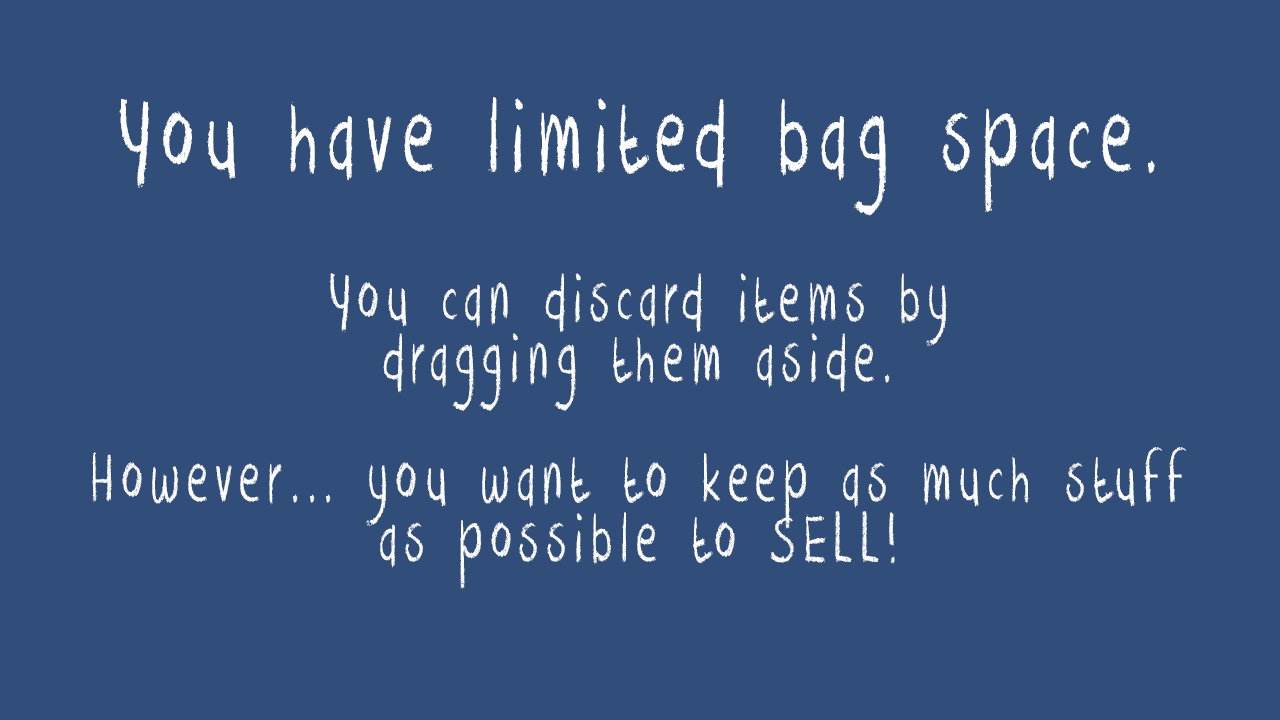
<style>
.page{position:relative;width:1280px;height:720px;background:#314d79}
.page>*{position:absolute;margin:0}
.t1{font:78.5px "DKCrayonCrumble";letter-spacing:0.159em;color:#ffffff;scale:0.64 1}
.t2{font:117.8px "DKCrayonCrumble";letter-spacing:0.159em;color:#ffffff;scale:0.64 1}
</style>
<div class="page">
<p class="t1" style="left:92px;top:97px;width:1094px;height:492px;text-align:center"><span class="t2">You have limited bag space.<br><br></span>You can discard items by<br>dragging them aside.<br><br>However... you want to keep as much stuff<br>as possible to SELL!</p>
</div>
